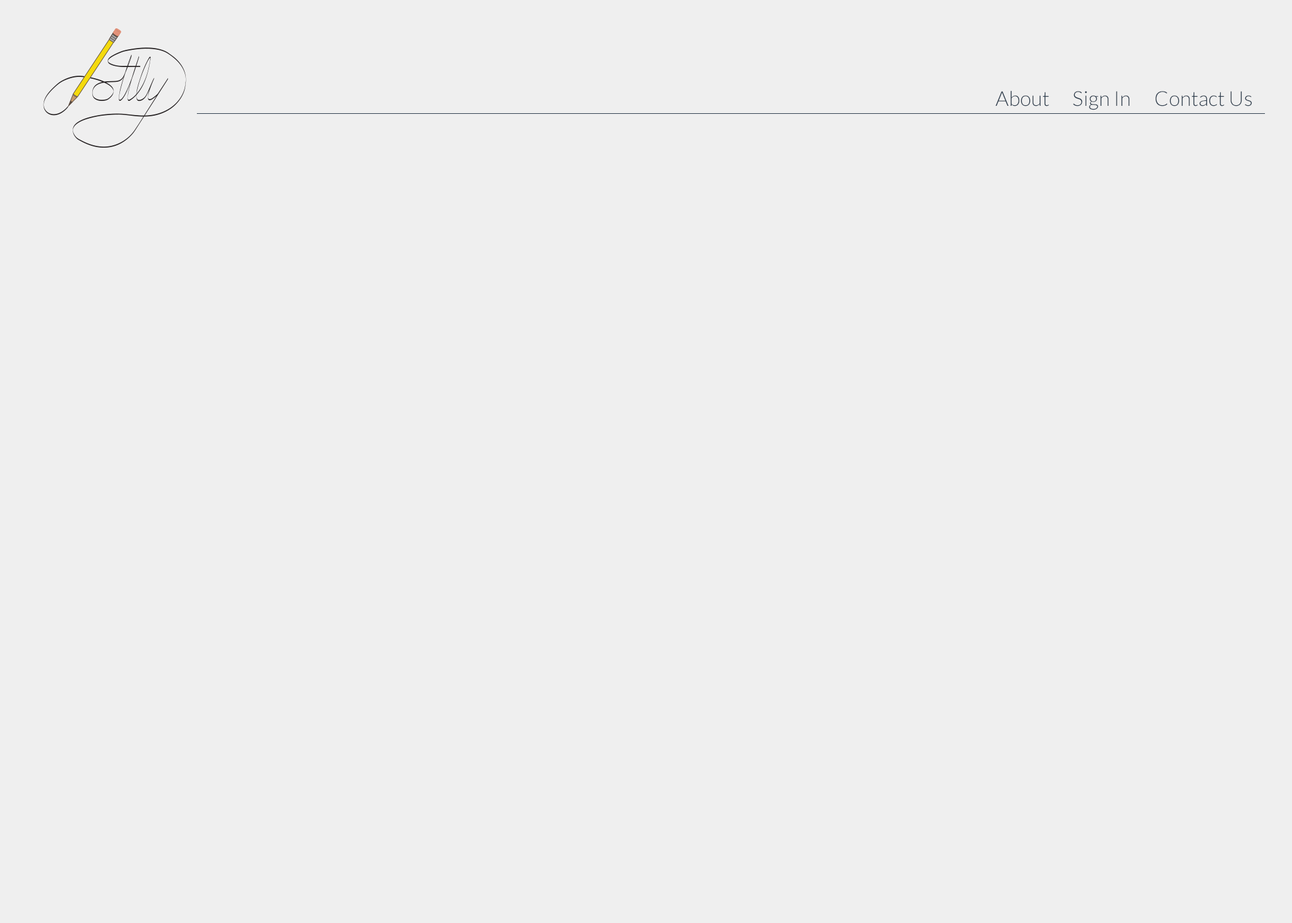
<style>
.page{position:relative;width:1292px;height:923px;background:#efefef}
.page>*{position:absolute;margin:0}
.t1{font:20.5px "Lato-Light";color:#2e3d4d}
</style>
<div class="page">
<p class="t1" style="left:995px;top:90px;width:54px;height:16px">About</p>
<p class="t1" style="left:1073px;top:91px;width:57px;height:19px">Sign In</p>
<p class="t1" style="left:1155px;top:91px;width:97px;height:15px">Contact Us</p>
</div>
